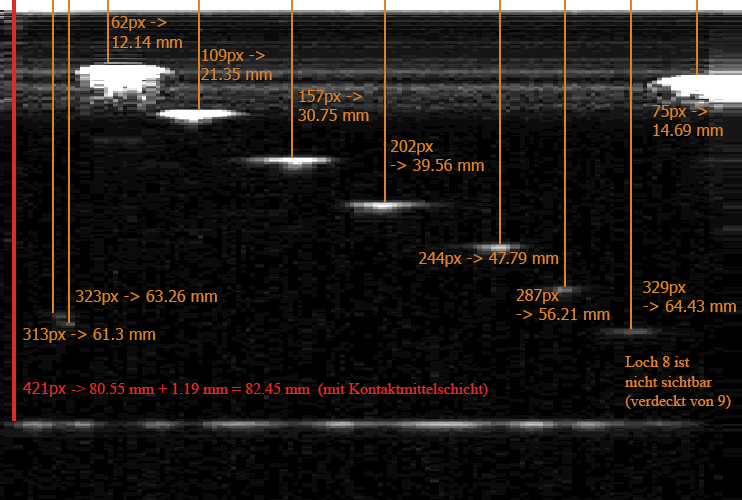
<style>
.page{position:relative;width:742px;height:500px;background:#000000}
.page>*{position:absolute;margin:0}
.t1{font:12px "Tahoma";color:#dd822a}
.t2{font:12px "TimesNewRomanPSMT";color:#dd822a}
.t3{font:12px "TimesNewRomanPSMT";color:#dd2a2a}
.t4{font:12px "Tahoma";color:#dd2a2a}
</style>
<div class="page">
<p class="t1" style="left:111px;top:16px;width:71px;height:32px">62px -&gt;<br>12.14 mm</p>
<p class="t1" style="left:201px;top:49px;width:71px;height:31px">109px -&gt;<br>21.35 mm</p>
<p class="t1" style="left:298px;top:90px;width:71px;height:31px">157px -&gt;<br>30.75 mm</p>
<p class="t1" style="left:652px;top:105px;width:71px;height:31px">75px -&gt;<br>14.69 mm</p>
<p class="t1" style="left:390px;top:140px;width:94px;height:31px">202px<br>-&gt; 39.56 mm</p>
<p class="t1" style="left:419px;top:252px;width:140px;height:15px">244px -&gt; 47.79 mm</p>
<p class="t1" style="left:643px;top:281px;width:93px;height:31px">329px<br>-&gt; 64.43 mm</p>
<p class="t1" style="left:76px;top:290px;width:141px;height:15px">323px -&gt; 63.26 mm</p>
<p class="t1" style="left:516px;top:289px;width:94px;height:31px">287px <br>-&gt; 56.21 mm</p>
<p class="t1" style="left:23px;top:328px;width:133px;height:15px">313px -&gt; 61.3 mm</p>
<p class="t2" style="left:625px;top:356px;width:106px;height:53px">Loch 8 ist <br>nicht sichtbar<br>(verdeckt von 9)</p>
<p class="t3" style="left:23px;top:382px;width:465px;height:15px"><span class="t4">421px </span>-&gt; 80.55 mm + 1.19 mm = 82.45 mm  (mit Kontaktmittelschicht)</p>
</div>
